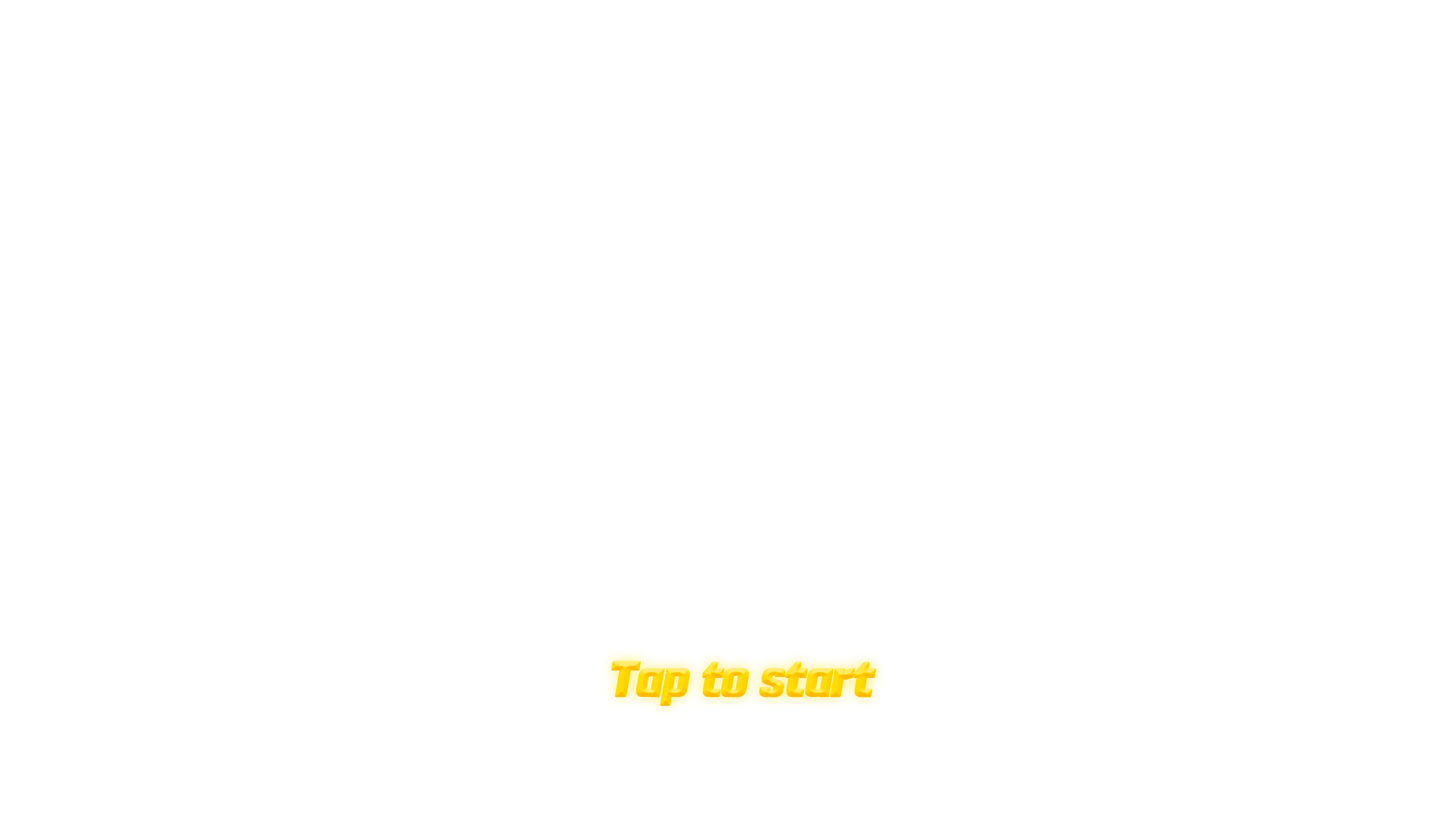
<style>
.page{position:relative;width:1456px;height:819px;background:#ffffff}
.page>*{position:absolute;margin:0}
.t1{font:40.9px "SDComicStencil-aBasic";letter-spacing:-0.03em;font-weight:bold;font-style:italic}
</style>
<div class="page">
<p class="t1" style="left:611px;top:660px;width:266px;height:46px">Tap to start</p>
</div>
